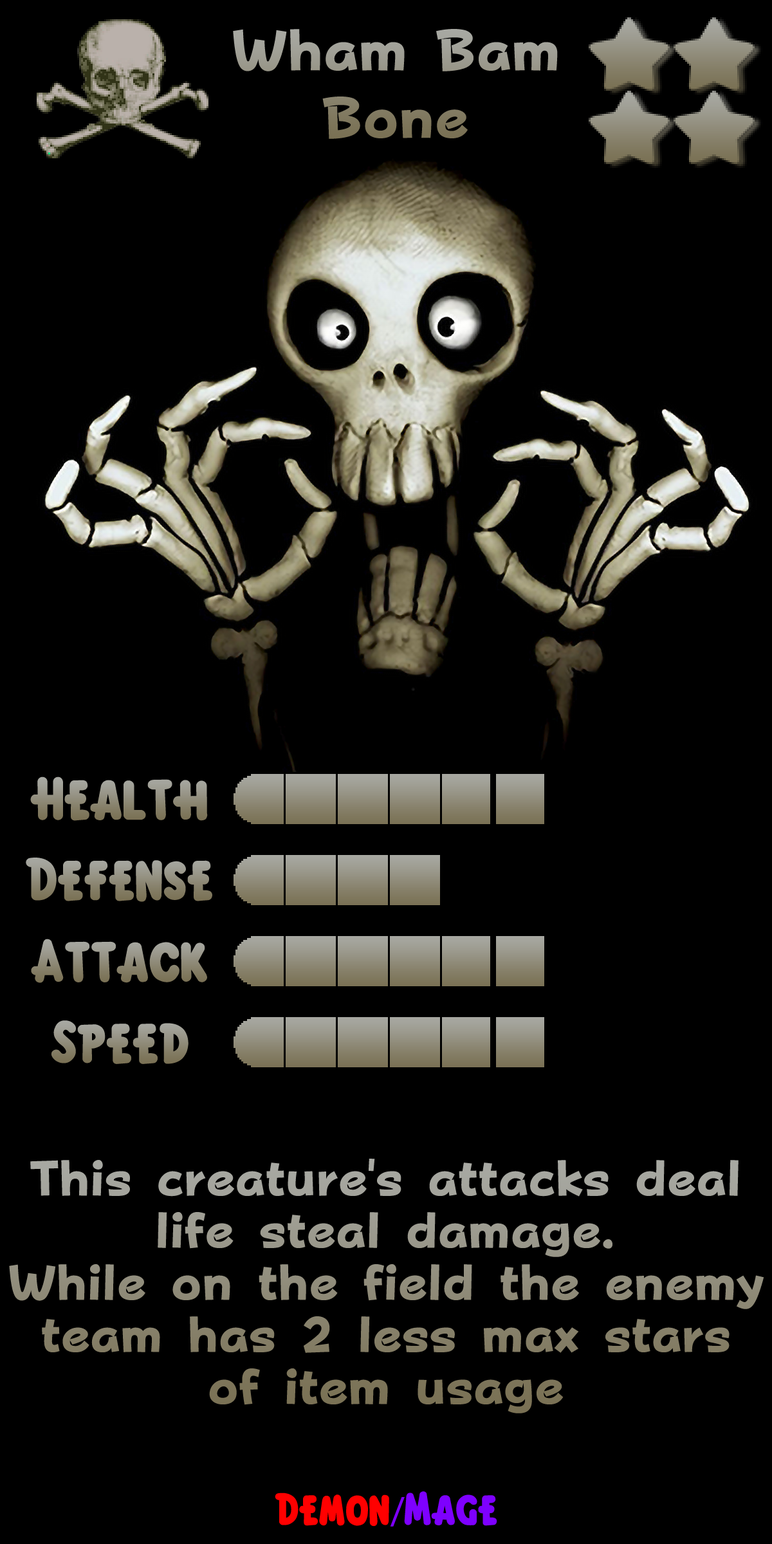
<style>
.page{position:relative;width:772px;height:1544px;background:#000000}
.page>*{position:absolute;margin:0}
.t1{font:98.4px/67.6px "FOTPopHappinessStrp-ExtraBold"}
.t2{font:92.7px "KirbyClassic"}
.t3{font:84.9px/52.1px "FOTPopHappinessStrp-ExtraBold"}
.t4{font:69.5px "KirbyClassic";color:#ff0000}
.t5{font:69.5px "MyriadPro-Regular";color:#7e00ff}
.t6{font:69.5px "KirbyClassic";color:#7e00ff}
</style>
<div class="page">
<p class="t1" style="left:233px;top:29px;width:325px;height:110px;text-align:center">Wham Bam<br>Bone</p>
<p class="t2" style="left:30px;top:777px;width:178px;height:44px">Health</p>
<p class="t2" style="left:26px;top:858px;width:186px;height:44px">Defense</p>
<p class="t2" style="left:31px;top:939px;width:176px;height:44px">Attack</p>
<p class="t2" style="left:51px;top:1021px;width:138px;height:43px">Speed</p>
<p class="t3" style="left:9px;top:1159px;width:755px;height:255px;text-align:center">This creature's attacks deal life steal damage. <br>While on the field the enemy team has 2 less max stars of item usage</p>
<p class="t4" style="left:275px;top:1492px;width:222px;height:35px">Demon<span class="t5">/</span><span class="t6">Mage</span></p>
</div>
